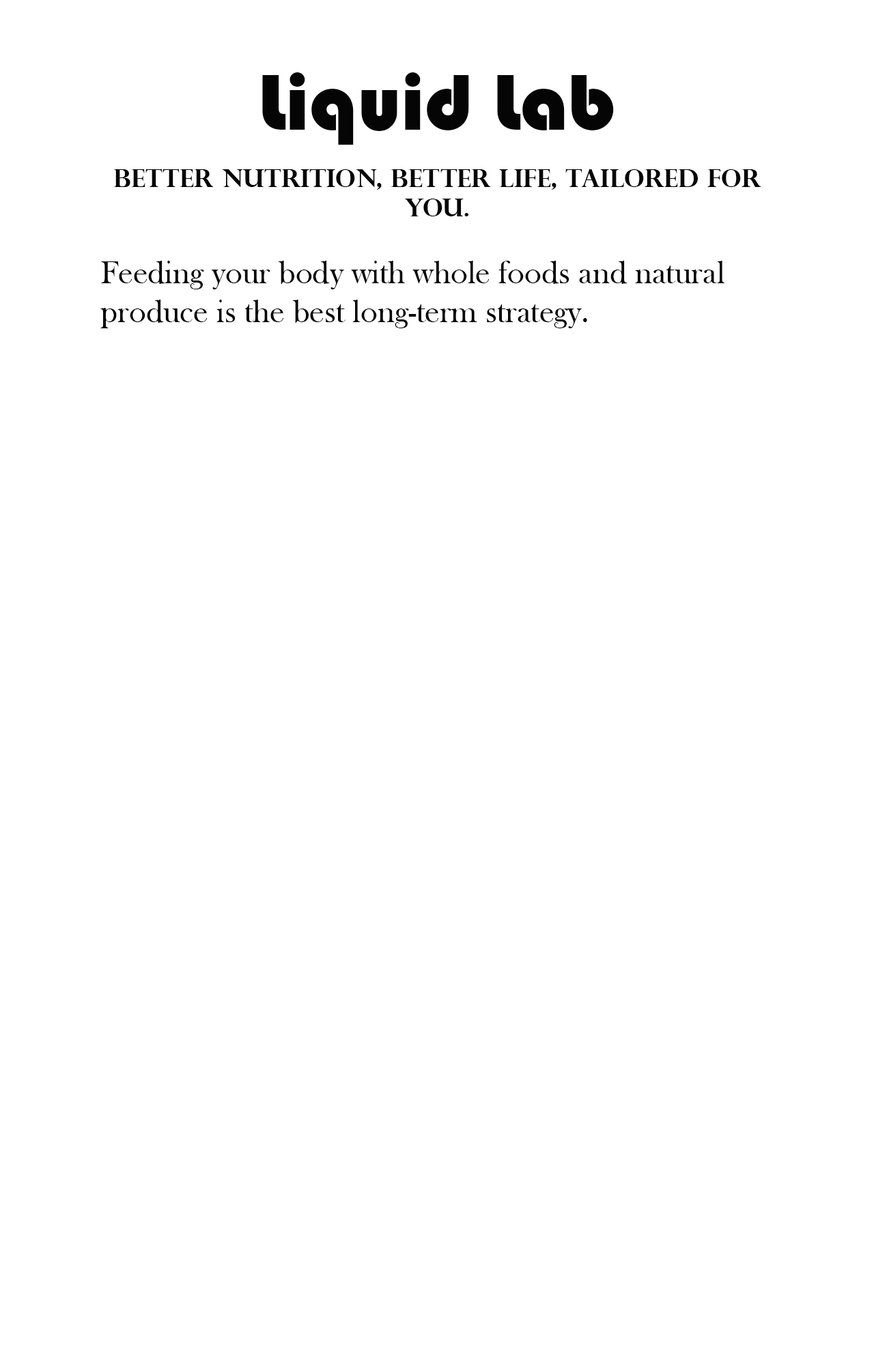
<style>
.page{position:relative;width:874px;height:1365px;background:#ffffff}
.page>*{position:absolute;margin:0}
.t1{font:81.9px "Bauhaus93";color:#050505}
.t2{font:24.6px "PerpetuaTitlingMT-Bold";color:#050505}
.t3{font:32.8px "BaskOldFace";color:#050505}
</style>
<div class="page">
<p class="t1" style="left:262px;top:72px;width:352px;height:73px">Liquid Lab</p>
<p class="t2" style="left:113px;top:169px;width:648px;height:47px;text-align:center">Better Nutrition, Better Life, Tailored for You.</p>
<p class="t3" style="left:100px;top:261px;width:624px;height:67px">Feeding your body with whole foods and natural produce is the best long-term strategy.</p>
</div>
